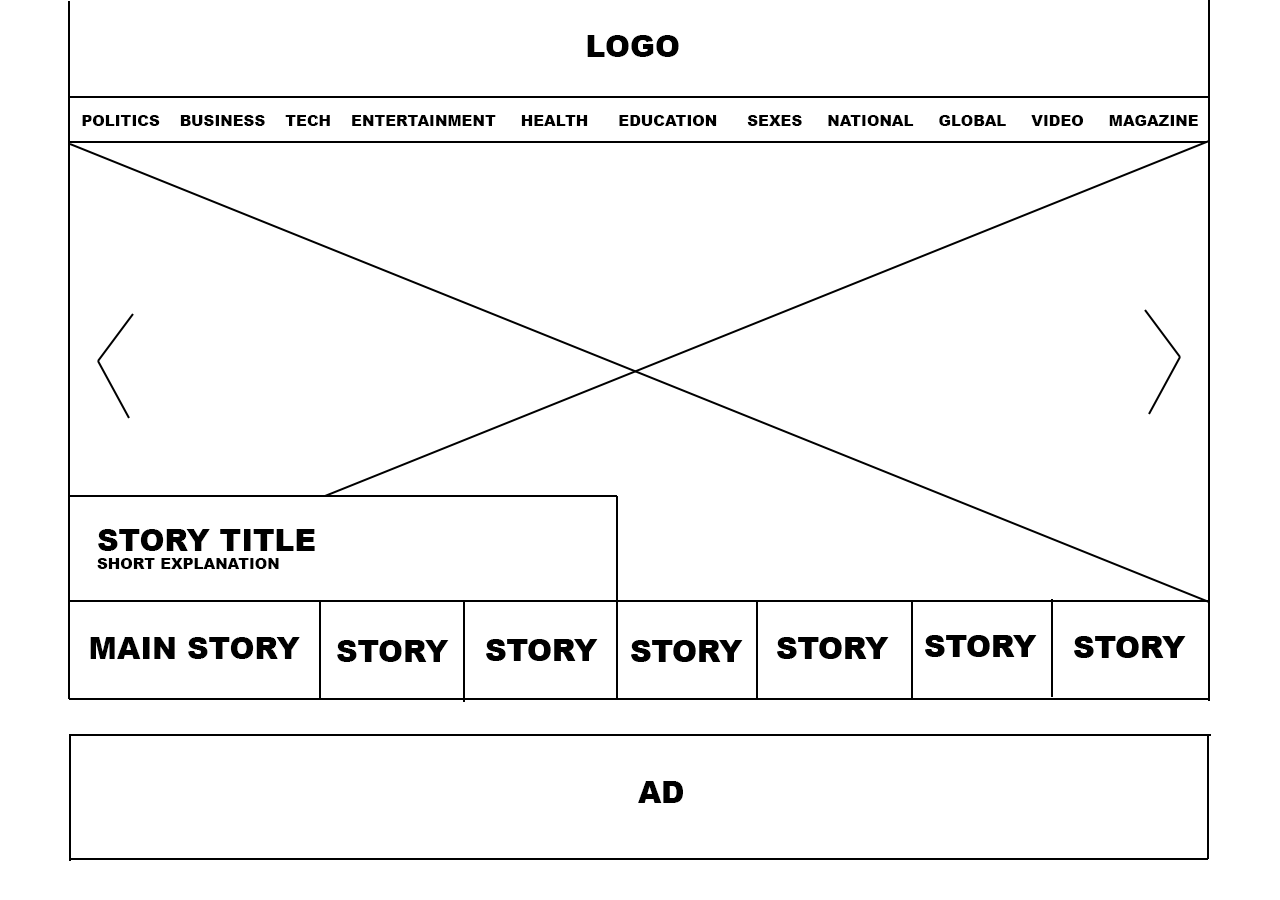
<style>
.page{position:relative;width:1280px;height:900px;background:#ffffff}
.page>*{position:absolute;margin:0}
.t1{font:30px "Arial-Black";color:#000000}
.t2{font:15px "Arial-Black";color:#000000}
</style>
<div class="page">
<p class="t1" style="left:587px;top:35px;width:92px;height:22px">LOGO</p>
<p class="t2" style="left:82px;top:115px;width:1116px;height:11px">POLITICS    BUSINESS    TECH    ENTERTAINMENT     HEALTH      EDUCATION      SEXES     NATIONAL     GLOBAL     VIDEO     MAGAZINE</p>
<p class="t2" style="left:97px;top:529px;width:218px;height:40px"><span class="t1">STORY TITLE<br></span>SHORT EXPLANATION</p>
<p class="t1" style="left:90px;top:637px;width:210px;height:22px">MAIN STORY</p>
<p class="t1" style="left:337px;top:640px;width:112px;height:22px">STORY</p>
<p class="t1" style="left:638px;top:781px;width:45px;height:22px">AD</p>
</div>
